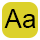
<style>
.page{position:relative;width:40px;height:40px;background:#dcd12b}
.page>*{position:absolute;margin:0}
.t1{font:26px "ArialMT";color:#000000}
</style>
<div class="page">
<p class="t1" style="left:4px;top:9px;width:32px;height:19px">Aa</p>
</div>
